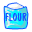
<style>
.page{position:relative;width:32px;height:32px;background:#ffffff}
.page>*{position:absolute;margin:0}
.t1{font:11.1px "DomCasualBT-Regular";letter-spacing:0.055em;color:#184eff;scale:0.79 1}
</style>
<div class="page">
<p class="t1" style="left:5px;top:13px;width:22px;height:8px">FLOUR</p>
</div>
